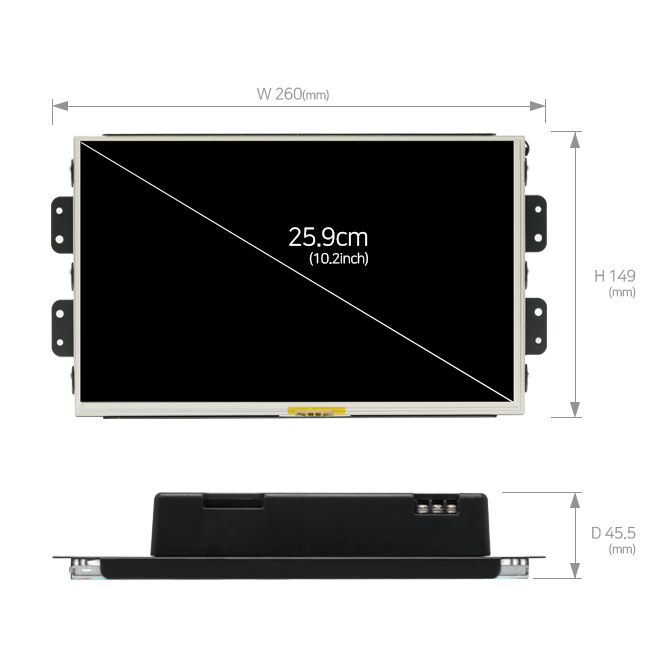
<style>
.page{position:relative;width:650px;height:650px;background:#ffffff}
.page>*{position:absolute;margin:0}
.t1{font:16px "NanumSquareR";letter-spacing:-0.03em;color:#939393}
.t2{font:12px "NanumSquareR";letter-spacing:-0.03em;color:#939393}
.t3{font:14px/18px "NanumSquareR";letter-spacing:-0.03em;color:#ffffff}
.t4{font:25px/18px "NanumSquareR";letter-spacing:-0.03em;color:#ffffff}
.t5{font:16px/15px "NanumSquareR";letter-spacing:-0.03em;color:#939393}
.t6{font:12px/15px "NanumSquareR";letter-spacing:-0.03em;color:#939393}
</style>
<div class="page">
<p class="t1" style="left:256px;top:87px;width:73px;height:15px">W 260<span class="t2">(mm)</span></p>
<p class="t3" style="left:289px;top:227px;width:79px;height:39px;text-align:right"><span class="t4">25.9cm<br></span>(10.2inch)</p>
<p class="t5" style="left:595px;top:269px;width:41px;height:30px;text-align:right">H 149<br><span class="t6">(mm)</span></p>
<p class="t5" style="left:592px;top:526px;width:44px;height:30px;text-align:right">D 45.5<br><span class="t6">(mm)</span></p>
</div>
